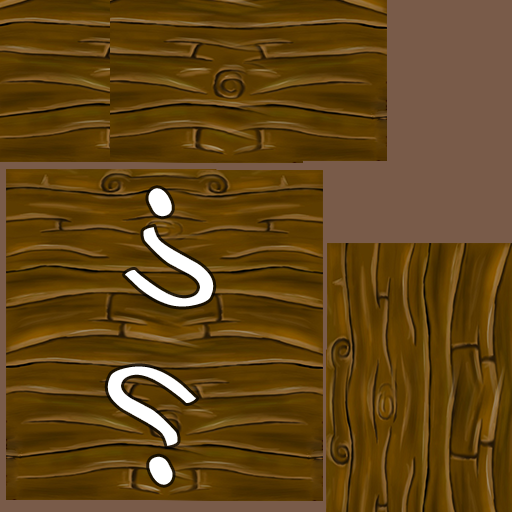
<style>
.page{position:relative;width:512px;height:512px}
.page>*{position:absolute;margin:0}
.t1{font:150.1px "ComicBook";letter-spacing:0.16em;color:#ffffff}
</style>
<div class="page">
<p class="t1" style="left:123px;top:186px;width:92px;height:122px;rotate:20deg">?</p>
<p class="t1" style="left:106px;top:365px;width:92px;height:122px;rotate:-160deg">?</p>
</div>
